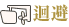
<style>
.page{position:relative;width:69px;height:27px;background:#ffffff}
.page>*{position:absolute;margin:0}
.t1{font:18px "RyuminPro-Heavy";color:#ae9442}
</style>
<div class="page">
<p class="t1" style="left:33px;top:4px;width:35px;height:18px">迴避</p>
</div>
